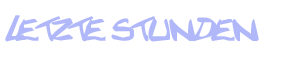
<style>
.page{position:relative;width:300px;height:60px;background:#ffffff}
.page>*{position:absolute;margin:0}
.t1{font:60px "Texted'critureLanfeust";color:#b0b8f9}
</style>
<div class="page">
<p class="t1" style="left:5px;top:15px;width:254px;height:27px">letzte stunden</p>
</div>
